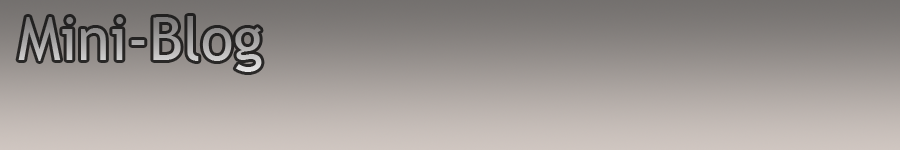
<style>
.page{position:relative;width:900px;height:150px}
.page>*{position:absolute;margin:0}
.t1{font:60px "TrebuchetMS"}
</style>
<div class="page">
<p class="t1" style="left:18px;top:16px;width:244px;height:56px">Mini-Blog</p>
</div>
